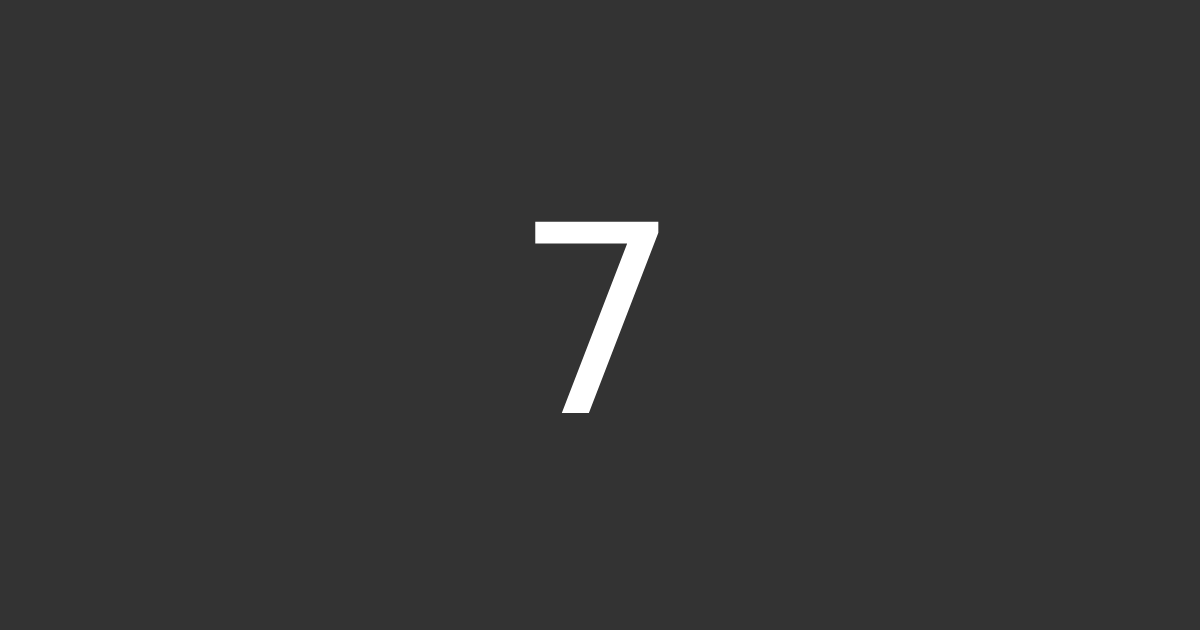
<style>
.page{position:relative;width:1200px;height:630px;background:#333333}
.page>*{position:absolute;margin:0}
.t1{font:262.5px "DejaVuSans";color:#ffffff}
</style>
<div class="page">
<p class="t1" style="left:535px;top:221px;width:124px;height:193px">7</p>
</div>
